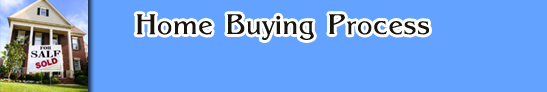
<style>
.page{position:relative;width:547px;height:92px;background:#64a2ff}
.page>*{position:absolute;margin:0}
.t1{font:28px "Pegasus";letter-spacing:0.05em;color:#17140e}
</style>
<div class="page">
<p class="t1" style="left:136px;top:14px;width:293px;height:26px">Home Buying Process</p>
</div>
